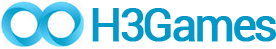
<style>
.page{position:relative;width:276px;height:49px;background:#fefffe}
.page>*{position:absolute;margin:0}
.t1{font:46px "Roboto-Regular";letter-spacing:-0.08em;color:#0398c8;font-weight:bold}
</style>
<div class="page">
<p class="t1" style="left:92px;top:8px;width:184px;height:34px">H3Games</p>
</div>
